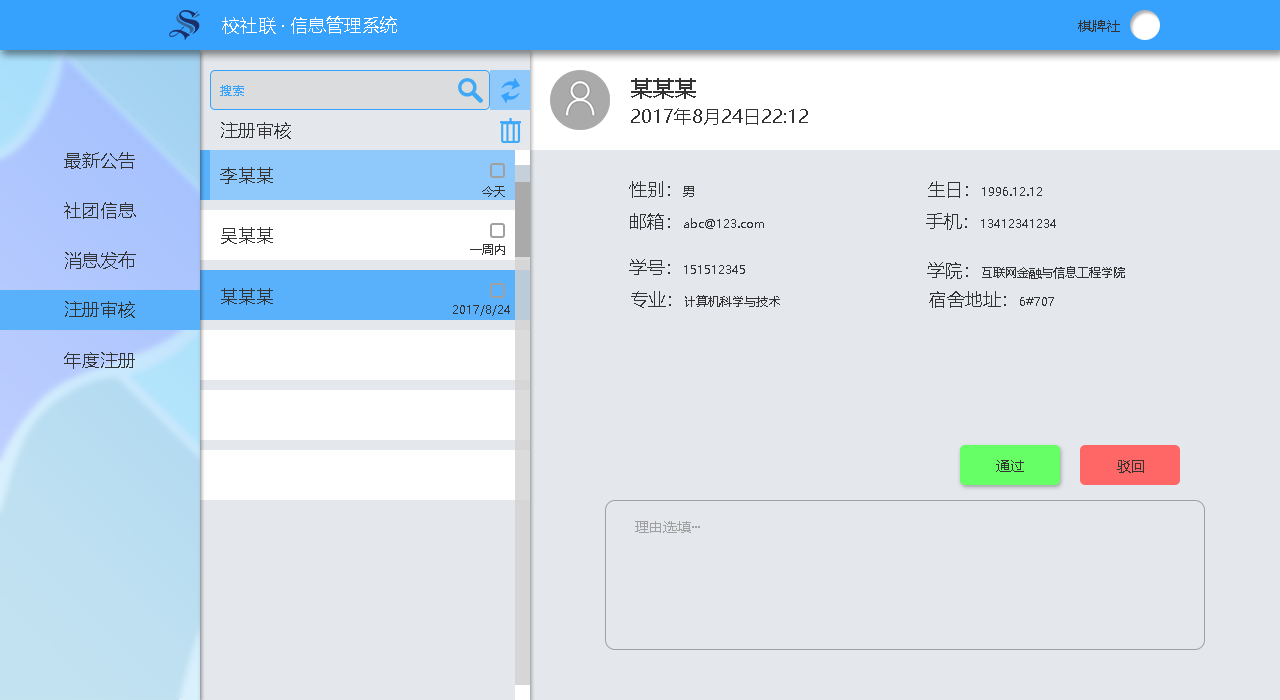
<style>
.page{position:relative;width:1280px;height:700px;background:#e4e8ec}
.page>*{position:absolute;margin:0}
.t1{font:18px "MicrosoftYaHei";color:#ffffff}
.t2{font:14px "MicrosoftYaHei";color:#333333}
.t3{font:22px "MicrosoftYaHei";color:#333333}
.t4{font:12px "MicrosoftYaHei";color:#37a2fe}
.t5{font:18px "MicrosoftYaHei";color:#333333}
.t6{font:12px "MicrosoftYaHei";color:#333333}
.t7{font:14px "MicrosoftYaHei";color:#a0a0a0}
</style>
<div class="page">
<p class="t1" style="left:222px;top:16px;width:175px;height:18px">校社联 · 信息管理系统</p>
<p class="t2" style="left:1078px;top:20px;width:42px;height:12px">棋牌社</p>
<p class="t3" style="left:631px;top:78px;width:65px;height:21px">某某某</p>
<p class="t4" style="left:220px;top:85px;width:24px;height:11px">搜索</p>
<p class="t5" style="left:631px;top:108px;width:177px;height:17px">2017年8月24日22:12</p>
<p class="t5" style="left:221px;top:122px;width:70px;height:17px">注册审核</p>
<p class="t5" style="left:64px;top:152px;width:71px;height:17px">最新公告</p>
<p class="t5" style="left:220px;top:167px;width:53px;height:17px">李某某</p>
<p class="t5" style="left:629px;top:181px;width:65px;height:17px">性别：<span class="t6">男</span></p>
<p class="t6" style="left:928px;top:181px;width:114px;height:17px"><span class="t5">生日：</span>1996.12.12</p>
<p class="t6" style="left:482px;top:186px;width:23px;height:11px">今天</p>
<p class="t5" style="left:64px;top:202px;width:72px;height:17px">社团信息</p>
<p class="t6" style="left:630px;top:213px;width:134px;height:17px"><span class="t5">邮箱：</span>abc@123.com</p>
<p class="t6" style="left:926px;top:213px;width:130px;height:17px"><span class="t5">手机：</span>13412341234</p>
<p class="t5" style="left:221px;top:227px;width:52px;height:17px">吴某某</p>
<p class="t6" style="left:470px;top:244px;width:35px;height:11px">一周内</p>
<p class="t5" style="left:65px;top:251px;width:71px;height:18px">消息发布</p>
<p class="t6" style="left:629px;top:259px;width:116px;height:16px"><span class="t5">学号：</span>151512345</p>
<p class="t6" style="left:927px;top:262px;width:198px;height:17px"><span class="t5">学院：</span>互联网金融与信息工程学院</p>
<p class="t5" style="left:221px;top:288px;width:52px;height:17px">某某某</p>
<p class="t6" style="left:631px;top:291px;width:149px;height:17px"><span class="t5">专业：</span>计算机科学与技术</p>
<p class="t5" style="left:929px;top:291px;width:125px;height:17px">宿舍地址：<span class="t6">6#707</span></p>
<p class="t5" style="left:65px;top:301px;width:70px;height:17px">注册审核</p>
<p class="t6" style="left:453px;top:305px;width:57px;height:11px">2017/8/24</p>
<p class="t5" style="left:64px;top:352px;width:71px;height:17px">年度注册</p>
<p class="t2" style="left:996px;top:460px;width:28px;height:12px">通过</p>
<p class="t2" style="left:1117px;top:460px;width:27px;height:13px">驳回</p>
<p class="t7" style="left:635px;top:521px;width:65px;height:12px">理由选填···</p>
</div>
